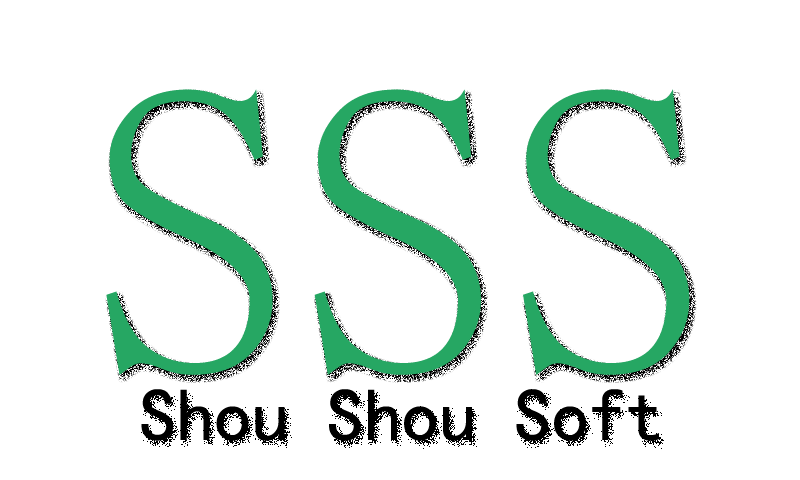
<style>
.page{position:relative;width:800px;height:480px;background:#ffffff}
.page>*{position:absolute;margin:0}
.t1{font:416.7px "SimSun";color:#26a863}
.t2{font:75px "SimHei";color:#000000}
.t3{font:416.7px "SimSun";color:#000000}
</style>
<div class="page">
<p class="t1" style="left:106px;top:89px;width:584px;height:286px">SSS</p>
<p class="t2" style="left:141px;top:389px;width:518px;height:52px;text-align:center">Shou Shou Soft<br><span class="t3">shouS</span></p>
</div>
